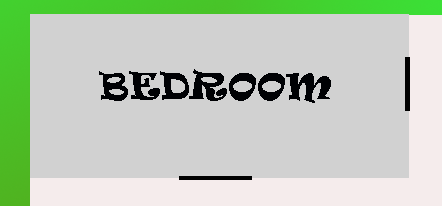
<style>
.page{position:relative;width:442px;height:206px;background:#d1d1d1}
.page>*{position:absolute;margin:0}
.t1{font:36px "Ravie";color:#000104}
</style>
<div class="page">
<p class="t1" style="left:99px;top:69px;width:232px;height:34px">BEDROOM</p>
</div>
